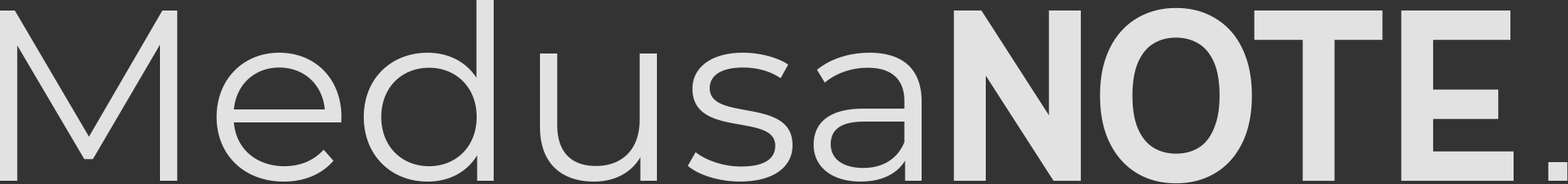
<style>
.page{position:relative;width:1568px;height:184px;background:#333333}
.page>*{position:absolute;margin:0}
.t1{font:243.6px "Montserrat-Regular";color:#e2e2e2}
.t2{font:243.6px "Logotown";color:#e2e2e2}
.t3{font:243.6px "CMUBright-Roman";color:#e2e2e2}
</style>
<div class="page">
<p class="t1" style="left:0px;top:0px;width:1568px;height:184px">Medusa<span class="t2">Note</span><span class="t3">.</span></p>
</div>
